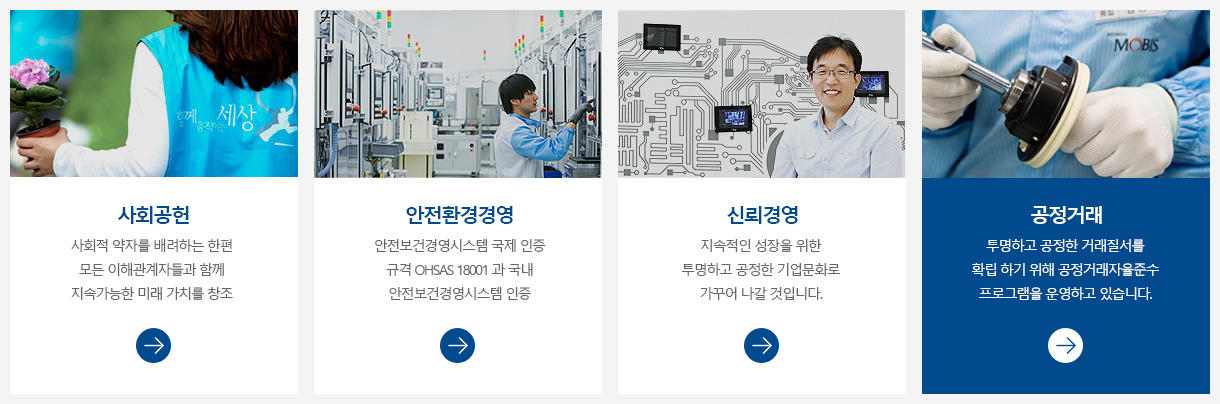
<style>
.page{position:relative;width:1220px;height:404px;background:#ffffff}
.page>*{position:absolute;margin:0}
.t1{font:20px "MalgunGothicBold";letter-spacing:-0.1em;color:#004a8d}
.t2{font:20px "MalgunGothicBold";letter-spacing:-0.1em;color:#ffffff}
.t3{font:14px/24px "MalgunGothic";letter-spacing:-0.1em;color:#666666}
.t4{font:14px/24px "MalgunGothic";letter-spacing:-0.1em;color:#ffffff}
</style>
<div class="page">
<p class="t1" style="left:117px;top:206px;width:72px;height:18px">사회공헌</p>
<p class="t1" style="left:406px;top:206px;width:107px;height:18px">안전환경경영</p>
<p class="t1" style="left:727px;top:206px;width:71px;height:18px">신뢰경영</p>
<p class="t2" style="left:1031px;top:206px;width:71px;height:18px">공정거래</p>
<p class="t3" style="left:71px;top:239px;width:162px;height:61px;text-align:center">사회적 약자를 배려하는 한편 모든 이해관계자들과 함께 지속가능한 미래 가치를 창조</p>
<p class="t3" style="left:375px;top:239px;width:171px;height:61px;text-align:center">안전보건경영시스템 국제 인증<br>규격 OHSAS 18001 과 국내<br>안전보건경영시스템 인증</p>
<p class="t3" style="left:682px;top:239px;width:158px;height:61px;text-align:center">지속적인 성장을 위한<br>투명하고 공정한 기업문화로<br>가꾸어 나갈 것입니다.</p>
<p class="t4" style="left:972px;top:239px;width:187px;height:61px;text-align:center">투명하고 공정한 거래질서를<br>확립 하기 위해 공정거래자율준수<br>프로그램을 운영하고 있습니다.</p>
</div>
